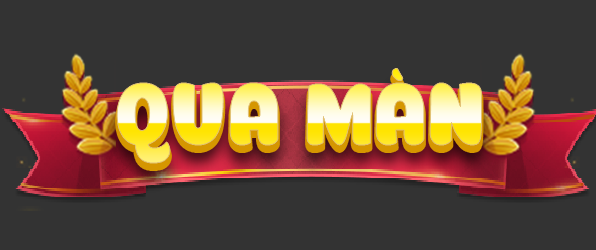
<style>
.page{position:relative;width:596px;height:250px;background:#333333}
.page>*{position:absolute;margin:0}
.t1{font:87.4px "iCielPony";letter-spacing:0.05em;scale:0.87 1}
</style>
<div class="page">
<p class="t1" style="left:117px;top:68px;width:365px;height:95px">QUA MÀN</p>
</div>
